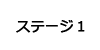
<style>
.page{position:relative;width:100px;height:50px;background:#ffffff}
.page>*{position:absolute;margin:0}
.t1{font:14px "Meiryo";color:#000000;font-weight:bold}
</style>
<div class="page">
<p class="t1" style="left:16px;top:20px;width:69px;height:13px">ステージ１</p>
</div>
